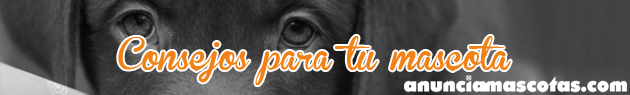
<style>
.page{position:relative;width:630px;height:95px}
.page>*{position:absolute;margin:0}
.t1{font:30.8px "BrannbollFet";color:#f08115}
</style>
<div class="page">
<p class="t1" style="left:118px;top:36px;width:393px;height:49px">Consejos para tu mascota</p>
</div>
